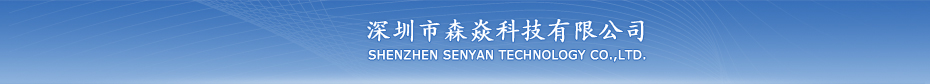
<style>
.page{position:relative;width:930px;height:84px}
.page>*{position:absolute;margin:0}
.t1{font:24px "KaiTi_GB2312";letter-spacing:0.05em;color:#ffffff;text-transform:uppercase;font-weight:bold}
.t2{font:12px "Verdana";color:#ffffff;text-transform:uppercase;font-weight:bold}
</style>
<div class="page">
<p class="t1" style="left:367px;top:18px;width:277px;height:25px">深圳市森焱科技有限公司</p>
<p class="t2" style="left:368px;top:50px;width:278px;height:12px">shenzhen senyan technology co.,ltd.</p>
</div>
